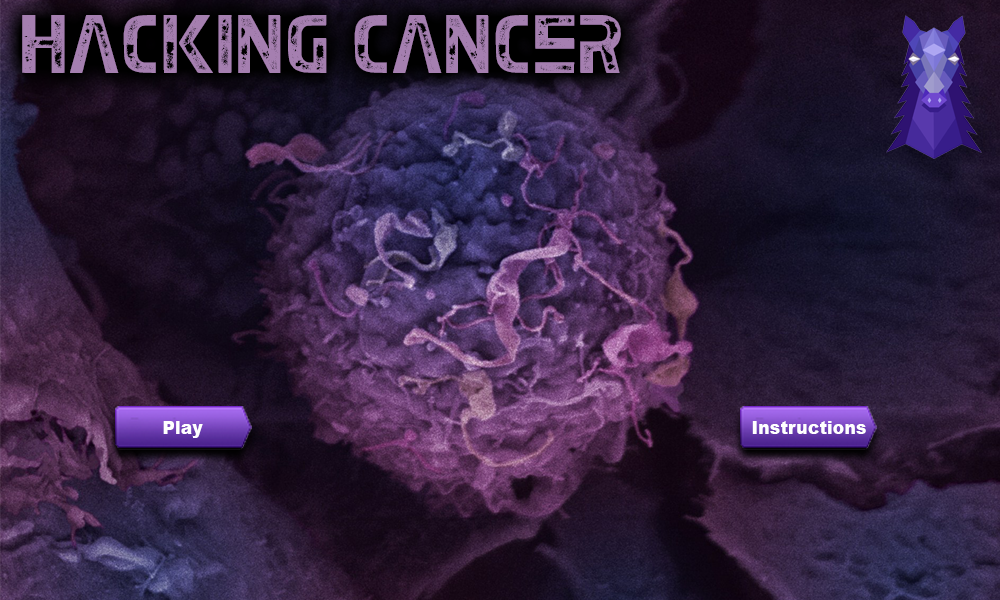
<style>
.page{position:relative;width:1000px;height:600px}
.page>*{position:absolute;margin:0}
.t1{font:75px "EarthKid";color:#a57fb0}
.t2{font:17.6px "Arial-Black";color:#ffffff}
</style>
<div class="page">
<p class="t1" style="left:22px;top:15px;width:599px;height:58px">Hacking Cancer</p>
<p class="t2" style="left:163px;top:421px;width:40px;height:17px">Play</p>
<p class="t2" style="left:752px;top:421px;width:114px;height:13px">Instructions</p>
</div>
